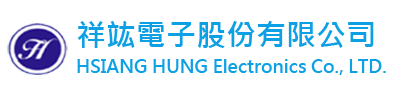
<style>
.page{position:relative;width:400px;height:100px;background:#ffffff}
.page>*{position:absolute;margin:0}
.t1{font:30px "MicrosoftJhengHeiBold";color:#0ea0e4}
.t2{font:18px "MicrosoftJhengHeiBold";color:#0ea0e4}
</style>
<div class="page">
<p class="t1" style="left:77px;top:21px;width:297px;height:27px">祥竑電子股份有限公司</p>
<p class="t2" style="left:77px;top:59px;width:309px;height:16px">HSIANG HUNG Electronics Co., LTD.</p>
</div>
